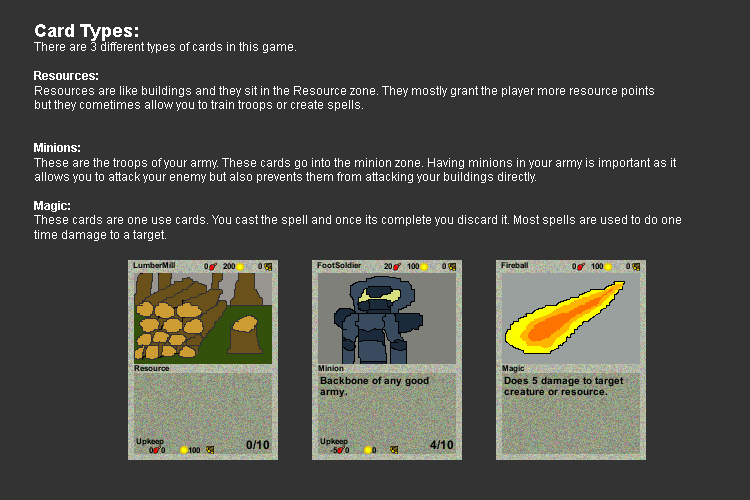
<style>
.page{position:relative;width:750px;height:500px;background:#333333}
.page>*{position:absolute;margin:0}
.t1{font:12px "ArialMT";color:#ffffff}
.t2{font:18px "Arial-BoldMT";color:#ffffff}
.t3{font:12px "Arial-BoldMT";color:#ffffff}
</style>
<div class="page">
<p class="t1" style="left:34px;top:24px;width:647px;height:217px"><span class="t2">Card Types:<br></span>There are 3 different types of cards in this game.<br><br><span class="t3">Resources:<br></span>Resources are like buildings and they sit in the Resource zone. They mostly grant the player more resource points<br>but they cometimes allow you to train troops or create spells.<br><br><br><span class="t3">Minions:<br></span>These are the troops of your army. These cards go into the minion zone. Having minions in your army is important as it<br>allows you to attack your enemy but also prevents them from attacking your buildings directly.<br><br><span class="t3">Magic:<br></span>These cards are one use cards. You cast the spell and once its complete you discard it. Most spells are used to do one <br>time damage to a target.</p>
</div>
